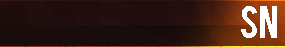
<style>
.page{position:relative;width:285px;height:47px}
.page>*{position:absolute;margin:0}
.t1{font:36px "Bebas";color:#ffffff}
</style>
<div class="page">
<p class="t1" style="left:241px;top:6px;width:36px;height:32px">SN</p>
</div>
